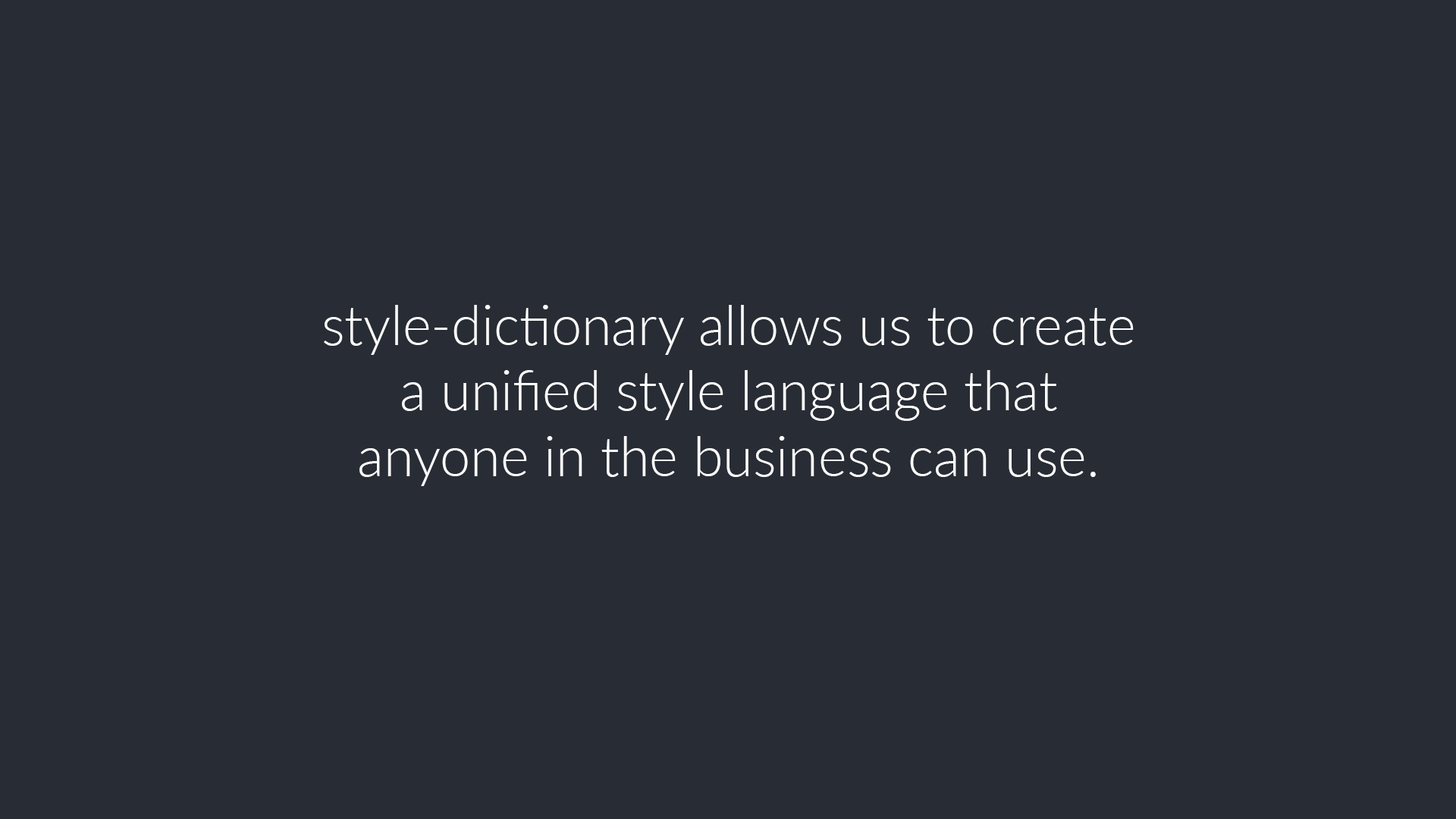
<style>
.page{position:relative;width:1456px;height:819px;background:#282c35}
.page>*{position:absolute;margin:0}
.t1{font:54.6px "Lato-Light";color:#ffffff}
</style>
<div class="page">
<p class="t1" style="left:324px;top:305px;width:810px;height:181px;text-align:center">style-dictionary allows us to create a unified style language that anyone in the business can use.</p>
</div>
